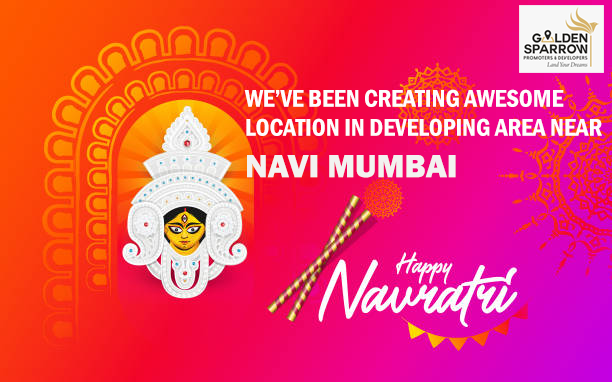
<style>
.page{position:relative;width:612px;height:382px}
.page>*{position:absolute;margin:0}
.t1{font:25px/29px "FranklinGothic-DemiCond";letter-spacing:-0.005em;color:#fdfdfd;text-transform:uppercase}
.t2{font:33.3px/41.5px "FranklinGothic-Heavy";letter-spacing:-0.005em;color:#f2f2f0;text-transform:uppercase}
</style>
<div class="page">
<p class="t1" style="left:244px;top:89px;width:358px;height:89px">We’ve been creating Awesome    location in developing area near <span class="t2">Navi Mumbai</span></p>
</div>
